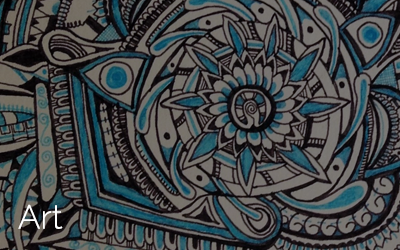
<style>
.page{position:relative;width:400px;height:250px}
.page>*{position:absolute;margin:0}
.t1{font:33.3px "Raleway-Light";color:#ffffff}
</style>
<div class="page">
<p class="t1" style="left:18px;top:204px;width:45px;height:25px">Art</p>
</div>
